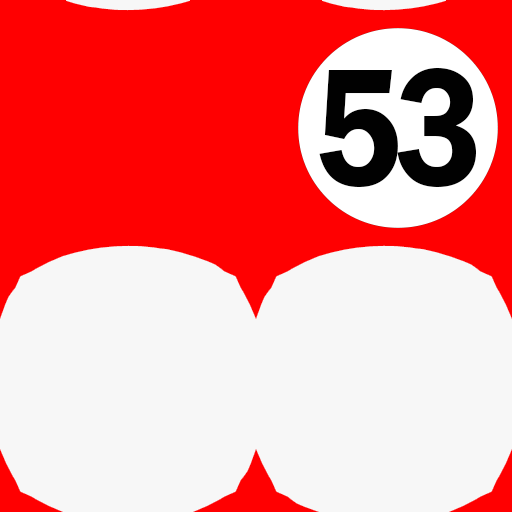
<style>
.page{position:relative;width:512px;height:512px;background:#f7f7f7}
.page>*{position:absolute;margin:0}
.t1{font:172.5px "FranklinGothic-Demi";letter-spacing:-0.05em;color:#010101;scale:0.87 1}
</style>
<div class="page">
<p class="t1" style="left:319px;top:68px;width:157px;height:119px">53</p>
</div>
